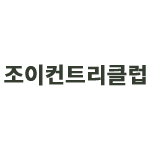
<style>
.page{position:relative;width:150px;height:150px;background:#ffffff}
.page>*{position:absolute;margin:0}
.t1{font:22px "NotoSansKR-Bold";letter-spacing:-0.005em;color:#353d31;font-weight:bold}
</style>
<div class="page">
<p class="t1" style="left:4px;top:64px;width:142px;height:22px">조이컨트리클럽</p>
</div>
